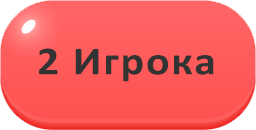
<style>
.page{position:relative;width:256px;height:130px}
.page>*{position:absolute;margin:0}
.t1{font:40px "Calibri-Bold";letter-spacing:0.04em;color:#333333;scale:1.1 1}
</style>
<div class="page">
<p class="t1" style="left:39px;top:48px;width:175px;height:34px">2 Игрока</p>
</div>
